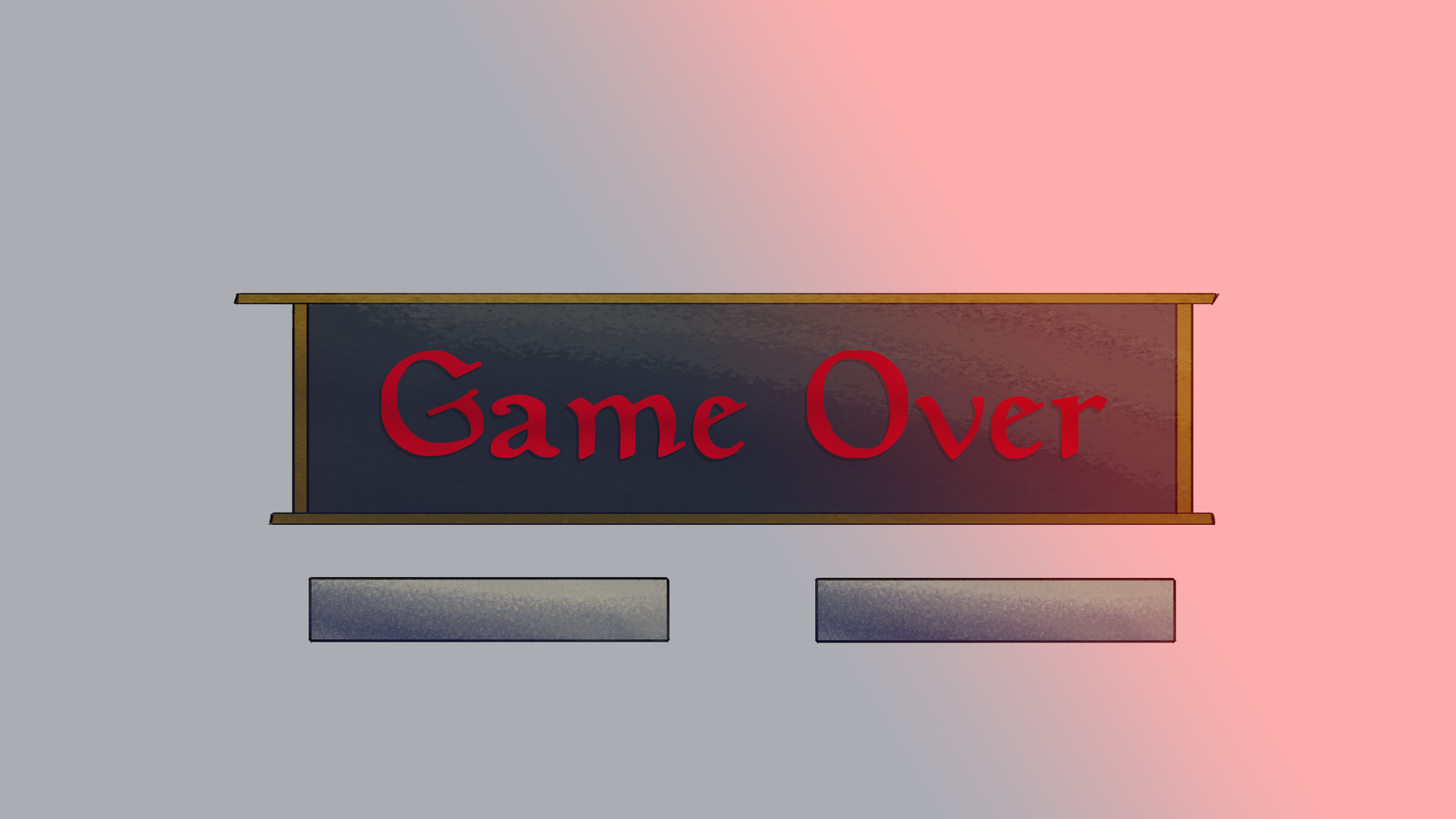
<style>
.page{position:relative;width:1456px;height:819px;background:#acadb3}
.page>*{position:absolute;margin:0}
.t1{font:151.7px "Planewalker";color:#ac071e}
</style>
<div class="page">
<p class="t1" style="left:381px;top:350px;width:727px;height:110px">Game Over</p>
</div>
